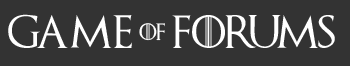
<style>
.page{position:relative;width:350px;height:66px;background:#333333}
.page>*{position:absolute;margin:0}
.t1{font:33.3px "GameofThrones";color:#ffffff}
.t2{font:33.1px "GameofThrones";color:#ffffff}
.t3{font:16.8px "GameofThrones";color:#ffffff}
</style>
<div class="page">
<p class="t1" style="left:8px;top:14px;width:124px;height:34px">GAME</p>
<p class="t2" style="left:172px;top:15px;width:163px;height:33px">Forums</p>
<p class="t3" style="left:139px;top:23px;width:26px;height:18px">OF</p>
</div>
